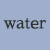
<style>
.page{position:relative;width:50px;height:50px;background:#9eaecb}
.page>*{position:absolute;margin:0}
.t1{font:16px "SawarabiMincho-Medium";color:#323433}
</style>
<div class="page">
<p class="t1" style="left:3px;top:17px;width:43px;height:13px">water</p>
</div>
